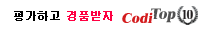
<style>
.page{position:relative;width:210px;height:30px;background:#ffffff}
.page>*{position:absolute;margin:0}
.t1{font:11px "Dotum";color:#000000;font-weight:bold}
.t2{font:11px "Dotum";color:#ff0042;font-weight:bold}
.t3{font:14.6px "Dutch801BT-ExtraBold";color:#d31b1d;font-style:italic}
.t4{font:15.5px "Dutch801BT-ExtraBold";color:#525252;font-style:italic}
</style>
<div class="page">
<p class="t1" style="left:14px;top:11px;width:99px;height:10px">평가하고 <span class="t2">경품받자</span></p>
<p class="t3" style="left:122px;top:12px;width:31px;height:11px">Codi</p>
<p class="t4" style="left:150px;top:8px;width:26px;height:15px">Top</p>
</div>
